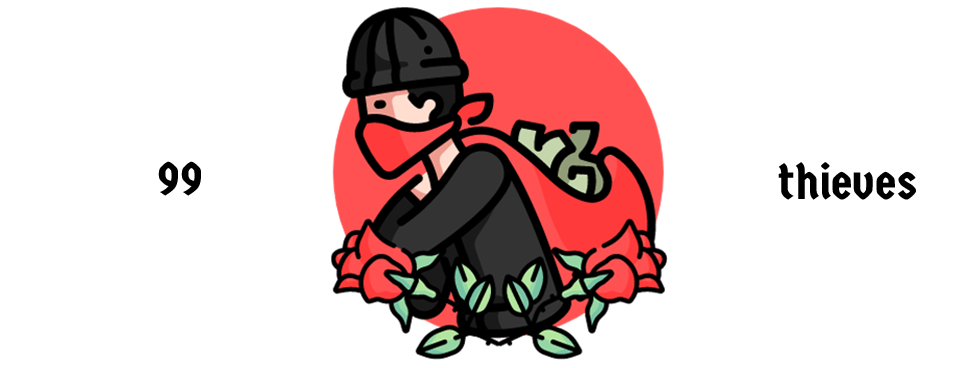
<style>
.page{position:relative;width:980px;height:368px;background:#ffffff}
.page>*{position:absolute;margin:0}
.t1{font:49.2px "GermaniaOne-Regular";color:#000000}
</style>
<div class="page">
<p class="t1" style="left:158px;top:161px;width:43px;height:35px">99</p>
<p class="t1" style="left:778px;top:162px;width:138px;height:38px">thieves</p>
</div>
